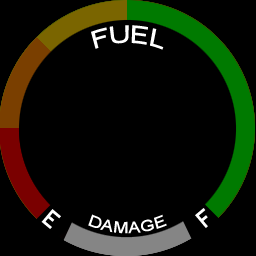
<style>
.page{position:relative;width:256px;height:256px;background:#000000}
.page>*{position:absolute;margin:0}
.t1{font:24.4px "ArialMT";color:#ffffff}
.t2{font:30px "8514oem";color:#ffffff}
.t3{font:15.7px "ArialMT";color:#ffffff}
</style>
<div class="page">
<p class="t1" style="left:91px;top:25px;width:73px;height:25px">FUEL</p>
<p class="t2" style="left:41px;top:209px;width:20px;height:20px;rotate:40deg">E</p>
<p class="t2" style="left:195px;top:208px;width:13px;height:20px;rotate:-40deg">F</p>
<p class="t3" style="left:88px;top:214px;width:79px;height:20px">DAMAGE</p>
</div>
